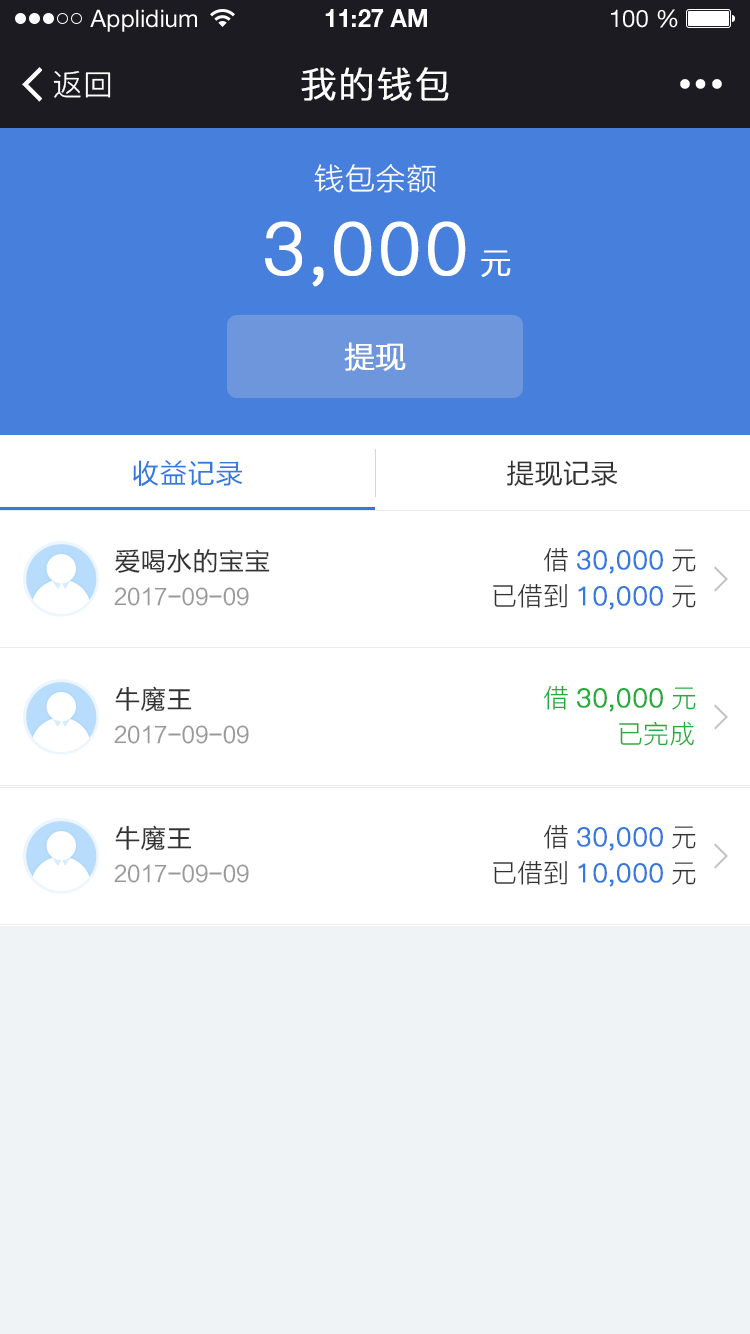
<style>
.page{position:relative;width:750px;height:1334px;background:#ffffff}
.page>*{position:absolute;margin:0}
.t1{font:24px "HelveticaNeueLTStd-Roman";color:#ffffff}
.t2{font:24px "HelveticaNeueLTStd-Bd";color:#ffffff}
.t3{font:30px "PingFang-SC-Regular";letter-spacing:0.025em;color:#ffffff}
.t4{font:36px "PingFang-SC-Regular";letter-spacing:0.025em;color:#ffffff;font-weight:bold}
.t5{font:30px "FZLTXHK--GBK1-0";letter-spacing:0.025em;color:#ffffff}
.t6{font:72px "PingFang-SC-Regular";letter-spacing:0.025em;color:#ffffff;font-weight:bold}
.t7{font:30px "FZLTXHK--GBK1-0";letter-spacing:0.025em;color:#ffffff;font-weight:bold}
.t8{font:30px "FZLTXHK--GBK1-0";color:#ffffff;font-weight:bold}
.t9{font:28px "FZLTH_YS_GBK";color:#3479e1}
.t10{font:28px "FZLTH_YS_GBK";color:#333333}
.t11{font:26px "FZLTH_YS_GBK";color:#333333}
.t12{font:26px "PingFang-SC-Regular";color:#3479e1;font-weight:bold}
.t13{font:26px "PingFang-SC-Regular";color:#333333}
.t14{font:22px "FZLTH_YS_GB18030";color:#999999}
.t15{font:26px "PingFang-SC-Regular";color:#22ac38;font-weight:bold}
.t16{font:26px "PingFang-SC-Regular";color:#22ac38}
</style>
<div class="page">
<p class="t1" style="left:90px;top:9px;width:107px;height:23px">Applidium</p>
<p class="t2" style="left:325px;top:9px;width:102px;height:18px">11:27 AM</p>
<p class="t1" style="left:611px;top:9px;width:67px;height:19px">100 %</p>
<p class="t3" style="left:53px;top:71px;width:58px;height:27px">返回</p>
<p class="t4" style="left:301px;top:67px;width:148px;height:34px">我的钱包</p>
<p class="t5" style="left:314px;top:164px;width:122px;height:29px">钱包余额</p>
<p class="t6" style="left:265px;top:221px;width:201px;height:66px">3,000</p>
<p class="t7" style="left:481px;top:250px;width:30px;height:27px">元</p>
<p class="t8" style="left:344px;top:342px;width:62px;height:29px">提现</p>
<p class="t9" style="left:133px;top:460px;width:110px;height:26px">收益记录</p>
<p class="t10" style="left:507px;top:460px;width:111px;height:26px">提现记录</p>
<p class="t11" style="left:115px;top:548px;width:155px;height:25px">爱喝水的宝宝</p>
<p class="t12" style="left:544px;top:547px;width:152px;height:27px"><span class="t13">借</span>30,000<span class="t13">元</span></p>
<p class="t14" style="left:114px;top:587px;width:135px;height:19px">2017-09-09</p>
<p class="t12" style="left:493px;top:583px;width:203px;height:27px"><span class="t13">已借到</span>10,000<span class="t13">元</span></p>
<p class="t11" style="left:115px;top:686px;width:77px;height:26px">牛魔王</p>
<p class="t15" style="left:544px;top:685px;width:152px;height:27px"><span class="t16">借</span>30,000<span class="t16">元</span></p>
<p class="t14" style="left:114px;top:725px;width:135px;height:19px">2017-09-09</p>
<p class="t16" style="left:619px;top:721px;width:75px;height:25px">已完成</p>
<p class="t11" style="left:115px;top:825px;width:77px;height:26px">牛魔王</p>
<p class="t12" style="left:544px;top:824px;width:152px;height:27px"><span class="t13">借</span>30,000<span class="t13">元</span></p>
<p class="t14" style="left:114px;top:864px;width:135px;height:19px">2017-09-09</p>
<p class="t12" style="left:493px;top:860px;width:203px;height:27px"><span class="t13">已借到</span>10,000<span class="t13">元</span></p>
</div>
